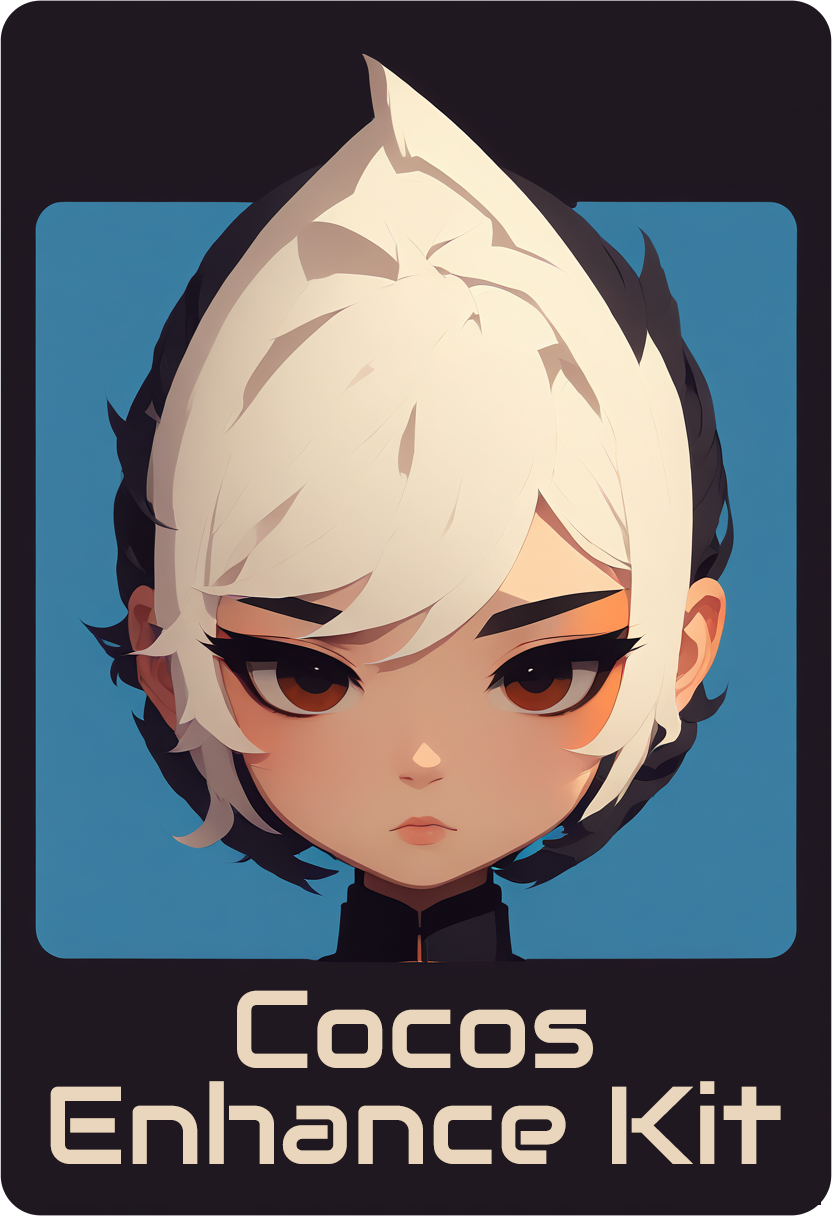
<style>
.page{position:relative;width:832px;height:1216px;background:#1f1820}
.page>*{position:absolute;margin:0}
.t1{font:110px/96px "Audiowide-Regular";color:#ead6bc}
</style>
<div class="page">
<p class="t1" style="left:50px;top:990px;width:731px;height:174px;text-align:center">Cocos<br>Enhance Kit</p>
</div>
